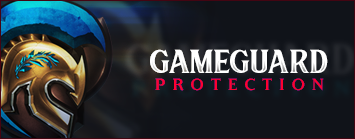
<style>
.page{position:relative;width:355px;height:139px;background:#101319}
.page>*{position:absolute;margin:0}
.t1{font:48px "Sultan";color:#f0f0f0}
.t2{font:16px "Londinia-Bold";letter-spacing:0.45em;color:#ff0030}
</style>
<div class="page">
<p class="t1" style="left:150px;top:49px;width:178px;height:24px">gameguard</p>
<p class="t2" style="left:155px;top:78px;width:169px;height:13px">PROTECTION</p>
</div>
